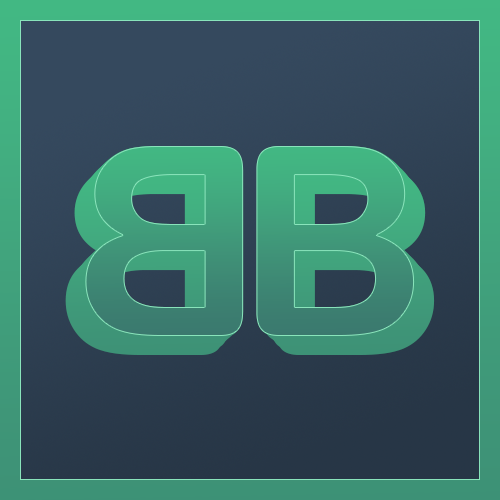
<style>
.page{position:relative;width:500px;height:500px}
.page>*{position:absolute;margin:0}
.t1{font:265.3px "ArialRoundedMTBold"}
</style>
<div class="page">
<p class="t1" style="left:81px;top:149px;width:158px;height:190px;rotate:180deg">B</p>
<p class="t1" style="left:83px;top:148px;width:159px;height:190px;rotate:180deg">B</p>
<p class="t1" style="left:84px;top:146px;width:159px;height:190px;rotate:180deg">B</p>
<p class="t1" style="left:85px;top:146px;width:159px;height:190px;rotate:180deg">B</p>
<p class="t1" style="left:256px;top:146px;width:159px;height:190px">B</p>
<p class="t1" style="left:257px;top:146px;width:159px;height:190px">B</p>
<p class="t1" style="left:259px;top:148px;width:159px;height:190px">B</p>
<p class="t1" style="left:261px;top:149px;width:159px;height:190px">B</p>
<p class="t1" style="left:70px;top:160px;width:159px;height:190px;rotate:180deg">B</p>
<p class="t1" style="left:74px;top:155px;width:159px;height:190px;rotate:180deg">B</p>
<p class="t1" style="left:78px;top:152px;width:159px;height:190px;rotate:180deg">B</p>
<p class="t1" style="left:263px;top:152px;width:159px;height:190px">B</p>
<p class="t1" style="left:267px;top:155px;width:159px;height:190px">B</p>
<p class="t1" style="left:271px;top:160px;width:159px;height:190px">B</p>
<p class="t1" style="left:65px;top:165px;width:159px;height:190px;rotate:180deg">B</p>
<p class="t1" style="left:276px;top:165px;width:159px;height:190px">B</p>
</div>
